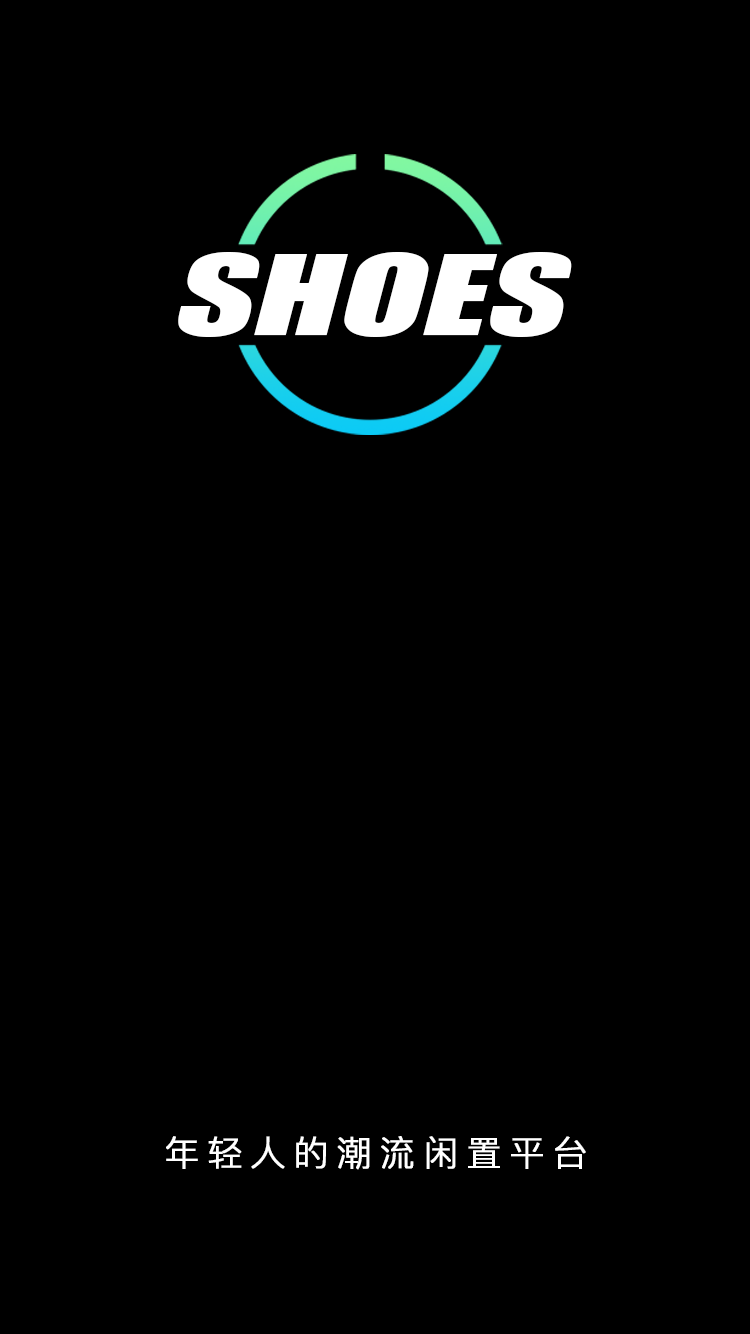
<style>
.page{position:relative;width:750px;height:1334px;background:#000000}
.page>*{position:absolute;margin:0}
.t1{font:103px "Impact";color:#ffffff;font-style:italic;scale:1.49 1}
.t2{font:35px "PingFang-SC-Regular";letter-spacing:0.205em;color:#ffffff;font-weight:bold}
</style>
<div class="page">
<p class="t1" style="left:178px;top:252px;width:394px;height:85px">SHOES</p>
<p class="t2" style="left:166px;top:1136px;width:420px;height:34px">年轻人的潮流闲置平台</p>
</div>
